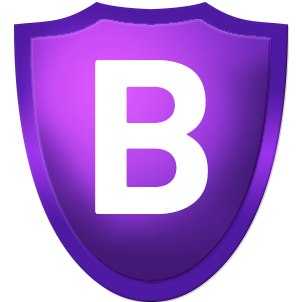
<style>
.page{position:relative;width:302px;height:302px;background:#ffffff}
.page>*{position:absolute;margin:0}
.t1{font:220px "Barlow-Bold";color:#ffffff}
</style>
<div class="page">
<p class="t1" style="left:95px;top:60px;width:113px;height:154px">B</p>
</div>
